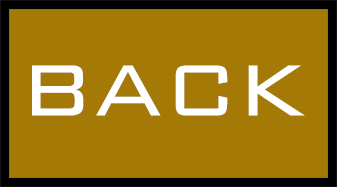
<style>
.page{position:relative;width:337px;height:187px;background:#a47905}
.page>*{position:absolute;margin:0}
.t1{font:96.7px "BankGothic-Light";color:#ffffff}
</style>
<div class="page">
<p class="t1" style="left:32px;top:65px;width:273px;height:51px">BACK</p>
</div>
